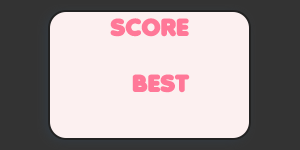
<style>
.page{position:relative;width:300px;height:150px;background:#fcf0f0}
.page>*{position:absolute;margin:0}
.t1{font:24px "Debussy";color:#ff7898}
</style>
<div class="page">
<p class="t1" style="left:110px;top:18px;width:79px;height:19px">SCORE</p>
<p class="t1" style="left:132px;top:74px;width:58px;height:19px">BEST</p>
</div>
